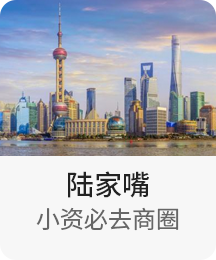
<style>
.page{position:relative;width:216px;height:260px;background:#f7f7f7}
.page>*{position:absolute;margin:0}
.t1{font:28px "SourceHanSansCN-Medium";color:#222222}
.t2{font:24px "SourceHanSansCN-Regular";color:#666666}
</style>
<div class="page">
<p class="t1" style="left:68px;top:171px;width:81px;height:27px">陆家嘴</p>
<p class="t2" style="left:36px;top:207px;width:143px;height:24px">小资必去商圈</p>
</div>
